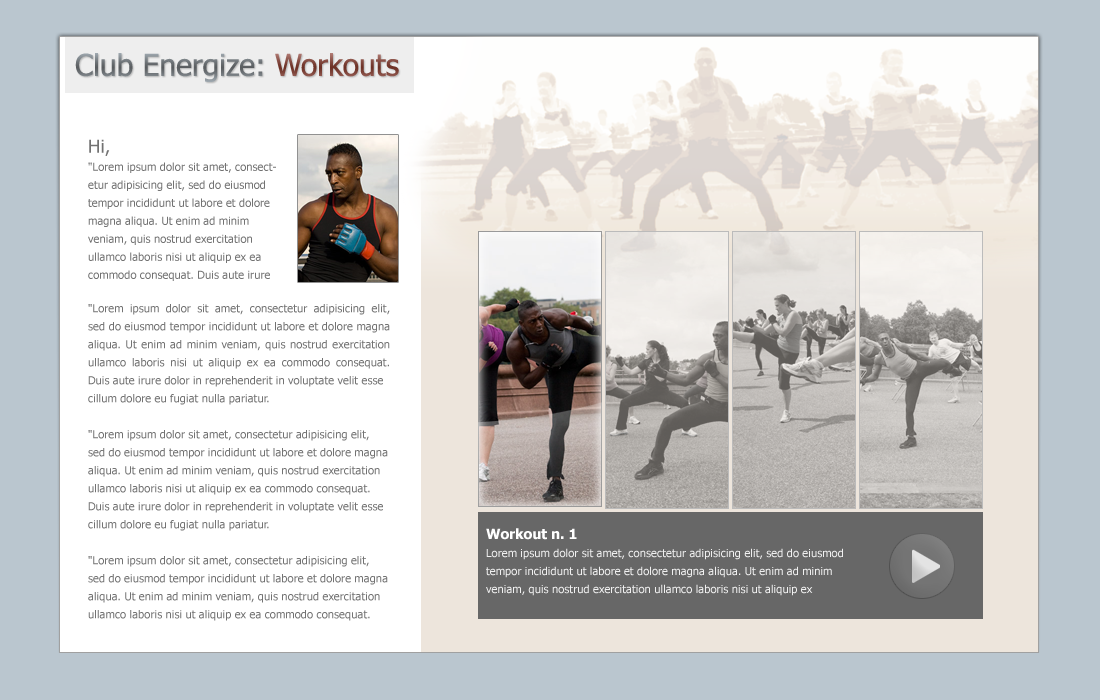
<style>
.page{position:relative;width:1100px;height:700px;background:#ffffff}
.page>*{position:absolute;margin:0}
.t1{font:30px "Tahoma"}
.t2{font:11px/18px "Tahoma";color:#727272}
.t3{font:18px/18px "Tahoma";color:#727272}
.t4{font:11px/18px "Tahoma";color:#f0f0f0}
.t5{font:14px/18px "Tahoma-Bold";color:#ffffff}
</style>
<div class="page">
<p class="t1" style="left:75px;top:53px;width:324px;height:29px">Club Energize: Workouts</p>
<p class="t2" style="left:88px;top:139px;width:188px;height:142px"><span class="t3">Hi,<br></span>"Lorem ipsum dolor sit amet, consectetur adipisicing elit, sed do eiusmod tempor incididunt ut labore et dolore magna aliqua. Ut enim ad minim veniam, quis nostrud exercitation ullamco laboris nisi ut aliquip ex ea commodo consequat. Duis aute irure dolor in reprehenderit in voluptate velit esse cillum dolore eu fugiat nulla pariatur.</p>
<p class="t2" style="left:88px;top:304px;width:302px;height:317px;text-align:justify">"Lorem ipsum dolor sit amet, consectetur adipisicing elit, sed do eiusmod tempor incididunt ut labore et dolore magna aliqua. Ut enim ad minim veniam, quis nostrud exercitation ullamco laboris nisi ut aliquip ex ea commodo consequat.<br>Duis aute irure dolor in reprehenderit in voluptate velit esse cillum dolore eu fugiat nulla pariatur.<br><br>"Lorem ipsum dolor sit amet, consectetur adipisicing elit, sed do eiusmod tempor incididunt ut labore et dolore magna aliqua. Ut enim ad minim veniam, quis nostrud exercitation ullamco laboris nisi ut aliquip ex ea commodo consequat. Duis aute irure dolor in reprehenderit in voluptate velit esse cillum dolore eu fugiat nulla pariatur.<br><br>"Lorem ipsum dolor sit amet, consectetur adipisicing elit, sed do eiusmod tempor incididunt ut labore et dolore magna aliqua. Ut enim ad minim veniam, quis nostrud exercitation ullamco laboris nisi ut aliquip ex ea commodo consequat. Duis aute irure dolor in reprehenderit in voluptate velit esse cillum dolore eu fugiat nulla pariatur.</p>
<p class="t4" style="left:486px;top:528px;width:357px;height:68px"><span class="t5">Workout n. 1<br></span>Lorem ipsum dolor sit amet, consectetur adipisicing elit, sed do eiusmod tempor incididunt ut labore et dolore magna aliqua. Ut enim ad minim veniam, quis nostrud exercitation ullamco laboris nisi ut aliquip ex</p>
</div>
